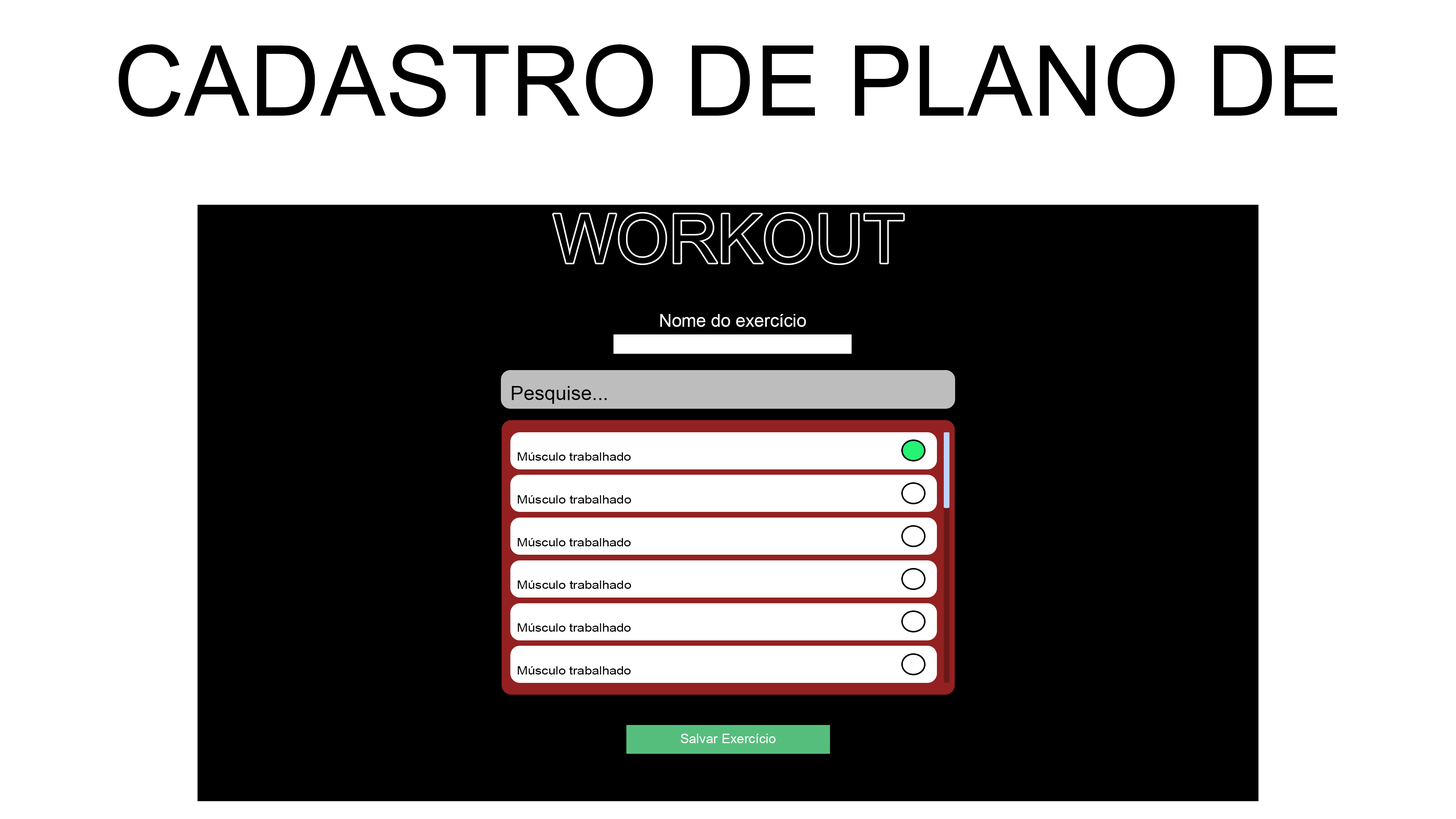
<style>
.page{position:relative;width:1456px;height:819px;background:#ffffff}
.page>*{position:absolute;margin:0}
.t1{font:97.8px "ArialMT";color:#000000}
.t2{font:17.7px "ArialMT";color:#ffffff}
.t3{font:19.9px "ArialMT";color:#000000}
.t4{font:11.7px "ArialMT";color:#000000;scale:1.12 1}
.t5{font:13.3px "ArialMT";color:#ffffff}
</style>
<div class="page">
<p class="t1" style="left:118px;top:44px;width:1219px;height:73px">CADASTRO DE PLANO DE TREINO</p>
<p class="t2" style="left:660px;top:314px;width:146px;height:13px">Nome do exercício</p>
<p class="t3" style="left:512px;top:386px;width:95px;height:18px">Pesquise...</p>
<p class="t4" style="left:518px;top:452px;width:113px;height:9px">Músculo trabalhado</p>
<p class="t4" style="left:518px;top:495px;width:113px;height:9px">Músculo trabalhado</p>
<p class="t4" style="left:518px;top:538px;width:113px;height:8px">Músculo trabalhado</p>
<p class="t4" style="left:518px;top:580px;width:113px;height:9px">Músculo trabalhado</p>
<p class="t4" style="left:518px;top:623px;width:113px;height:9px">Músculo trabalhado</p>
<p class="t4" style="left:518px;top:666px;width:113px;height:9px">Músculo trabalhado</p>
<p class="t5" style="left:681px;top:734px;width:95px;height:9px">Salvar Exercício</p>
</div>
